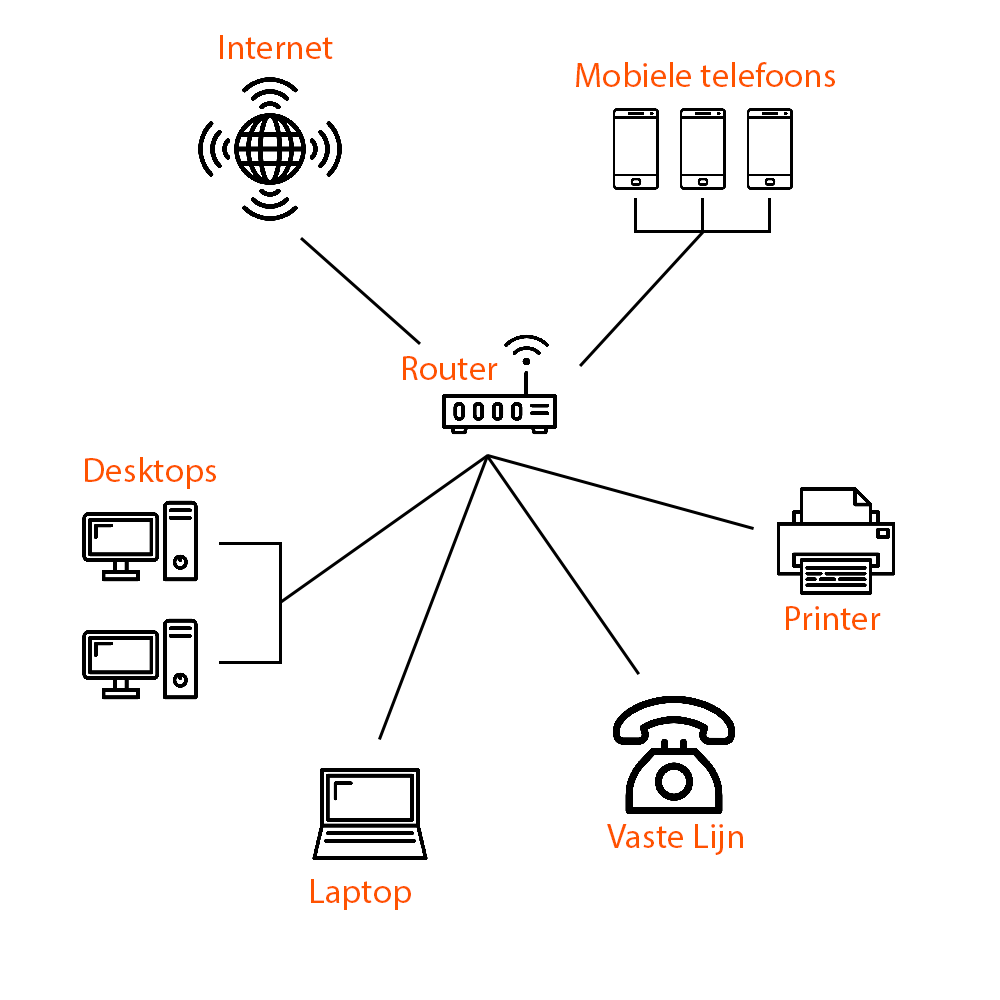
<style>
.page{position:relative;width:1000px;height:1000px;background:#ffffff}
.page>*{position:absolute;margin:0}
.t1{font:35px "MyriadPro-Regular";color:#ff5300}
</style>
<div class="page">
<p class="t1" style="left:220px;top:35px;width:113px;height:24px">Internet</p>
<p class="t1" style="left:576px;top:62px;width:259px;height:25px">Mobiele telefoons</p>
<p class="t1" style="left:403px;top:356px;width:95px;height:24px">Router</p>
<p class="t1" style="left:85px;top:457px;width:131px;height:32px">Desktops</p>
<p class="t1" style="left:786px;top:606px;width:95px;height:24px">Printer</p>
<p class="t1" style="left:607px;top:824px;width:136px;height:31px">Vaste Lijn</p>
<p class="t1" style="left:311px;top:879px;width:100px;height:31px">Laptop</p>
</div>
